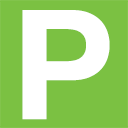
<style>
.page{position:relative;width:128px;height:128px;background:#7bc142}
.page>*{position:absolute;margin:0}
.t1{font:152.8px "HelveticaNeue-Bold";color:#ffffff}
</style>
<div class="page">
<p class="t1" style="left:22px;top:10px;width:88px;height:110px">P</p>
</div>
